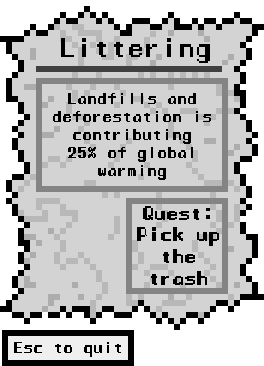
<style>
.page{position:relative;width:264px;height:366px;background:#d3d3d3}
.page>*{position:absolute;margin:0}
.t1{font:25px "ManaspaceReg";color:#000000}
.t2{font:15px "ManaspaceReg";color:#000000}
.t3{font:18px "ManaspaceReg";color:#000000}
</style>
<div class="page">
<p class="t1" style="left:61px;top:38px;width:149px;height:25px">Littering</p>
<p class="t2" style="left:53px;top:93px;width:158px;height:87px;text-align:center">Landfills and deforestation is contributing<br>25% of global warming</p>
<p class="t3" style="left:137px;top:206px;width:82px;height:79px;text-align:center">Quest:<br>Pick up the trash</p>
</div>
